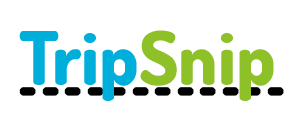
<style>
.page{position:relative;width:300px;height:125px;background:#ffffff}
.page>*{position:absolute;margin:0}
.t1{font:74px "Dosis-ExtraBold";color:#00aedb}
.t2{font:74px "Dosis-ExtraBold";color:#8ec127}
</style>
<div class="page">
<p class="t1" style="left:19px;top:30px;width:255px;height:71px">Trip<span class="t2">Snip</span></p>
</div>
